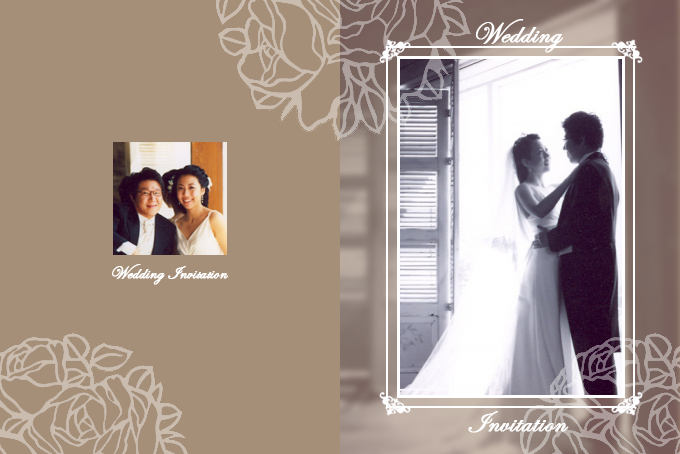
<style>
.page{position:relative;width:680px;height:454px;background:#a68f79}
.page>*{position:absolute;margin:0}
.t1{font:30px "EdwardianScriptITC";letter-spacing:0.005em;color:#ffffff;font-weight:bold}
.t2{font:18px "EdwardianScriptITC";letter-spacing:0.005em;color:#ffffff;font-weight:bold}
</style>
<div class="page">
<p class="t1" style="left:475px;top:19px;width:88px;height:34px">Wedding</p>
<p class="t2" style="left:112px;top:264px;width:117px;height:21px">Wedding Invitation</p>
<p class="t1" style="left:468px;top:411px;width:101px;height:22px">Invitation</p>
</div>
